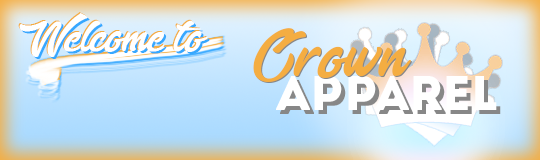
<style>
.page{position:relative;width:540px;height:160px}
.page>*{position:absolute;margin:0}
.t1{font:72px "EnlightenyourDestiny";color:#ffffff}
.t2{font:72px "EnlightenyourDestiny"}
.t3{font:108px "EnlightenyourDestiny";color:#f4ad42}
.t4{font:48px "Intro";color:#ffffff}
.t5{font:48px "Intro"}
</style>
<div class="page">
<p class="t1" style="left:18px;top:12px;width:189px;height:44px">Welcome to</p>
<p class="t1" style="left:19px;top:13px;width:189px;height:44px">Welcome to</p>
<p class="t2" style="left:21px;top:15px;width:189px;height:44px">Welcome to</p>
<p class="t3" style="left:253px;top:28px;width:158px;height:54px">Crown</p>
<p class="t3" style="left:254px;top:29px;width:158px;height:54px">Crown</p>
<p class="t4" style="left:276px;top:76px;width:221px;height:34px">APPAREL</p>
<p class="t5" style="left:280px;top:80px;width:221px;height:34px">APPAREL</p>
</div>
